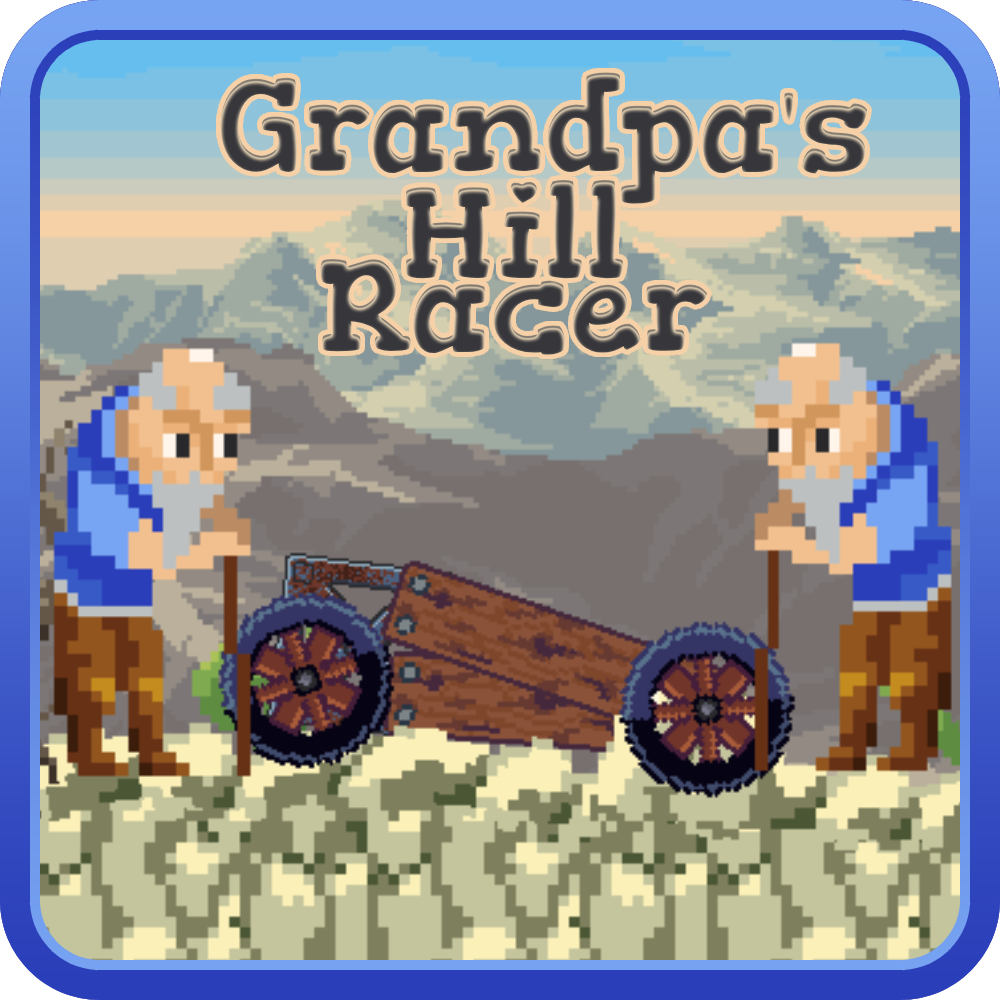
<style>
.page{position:relative;width:1000px;height:1000px}
.page>*{position:absolute;margin:0}
.t1{font:130px "Gorditas-Regular"}
</style>
<div class="page">
<p class="t1" style="left:220px;top:72px;width:647px;height:132px">Grandpa's</p>
<p class="t1" style="left:406px;top:180px;width:217px;height:99px">Hill</p>
<p class="t1" style="left:320px;top:259px;width:387px;height:96px">Racer</p>
</div>
